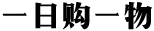
<style>
.page{position:relative;width:154px;height:31px;background:#ffffff}
.page>*{position:absolute;margin:0}
.t1{font:30px "MFYanSong_Noncommercial-Regular";color:#000000;font-weight:bold}
</style>
<div class="page">
<p class="t1" style="left:2px;top:1px;width:150px;height:29px">一日购一物</p>
</div>
